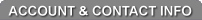
<style>
.page{position:relative;width:202px;height:20px;background:#858585}
.page>*{position:absolute;margin:0}
.t1{font:13.3px "Arial-BoldMT";color:#ffffff}
</style>
<div class="page">
<p class="t1" style="left:8px;top:5px;width:184px;height:11px">ACCOUNT &amp; CONTACT INFO</p>
</div>
